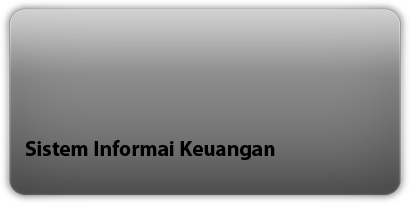
<style>
.page{position:relative;width:410px;height:205px}
.page>*{position:absolute;margin:0}
.t1{font:21.3px "MyriadPro-Bold";color:#000000}
</style>
<div class="page">
<p class="t1" style="left:25px;top:140px;width:250px;height:20px">Sistem Informai Keuangan</p>
</div>
